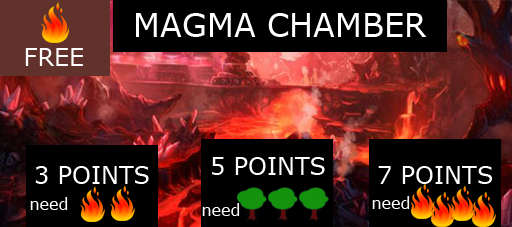
<style>
.page{position:relative;width:512px;height:227px;background:#000000}
.page>*{position:absolute;margin:0}
.t1{font:32px "Verdana";color:#ffffff}
.t2{font:24px "Verdana";color:#ffffff}
.t3{font:16px "Verdana";color:#ffffff}
</style>
<div class="page">
<p class="t1" style="left:136px;top:13px;width:291px;height:24px">MAGMA CHAMBER</p>
<p class="t2" style="left:25px;top:48px;width:58px;height:18px">FREE</p>
<p class="t2" style="left:212px;top:157px;width:113px;height:18px">5 POINTS</p>
<p class="t2" style="left:35px;top:166px;width:114px;height:18px">3 POINTS</p>
<p class="t2" style="left:378px;top:166px;width:114px;height:18px">7 POINTS</p>
<p class="t3" style="left:30px;top:197px;width:38px;height:13px">need</p>
<p class="t3" style="left:372px;top:196px;width:38px;height:13px">need</p>
<p class="t3" style="left:202px;top:203px;width:38px;height:13px">need</p>
</div>
